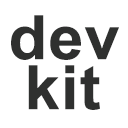
<style>
.page{position:relative;width:128px;height:128px;background:#ffffff}
.page>*{position:absolute;margin:0}
.t1{font:61.2px "Arial-BoldMT";letter-spacing:0.02em;color:#2f302f}
</style>
<div class="page">
<p class="t1" style="left:11px;top:15px;width:108px;height:45px">dev</p>
<p class="t1" style="left:28px;top:65px;width:72px;height:45px">kit</p>
</div>
